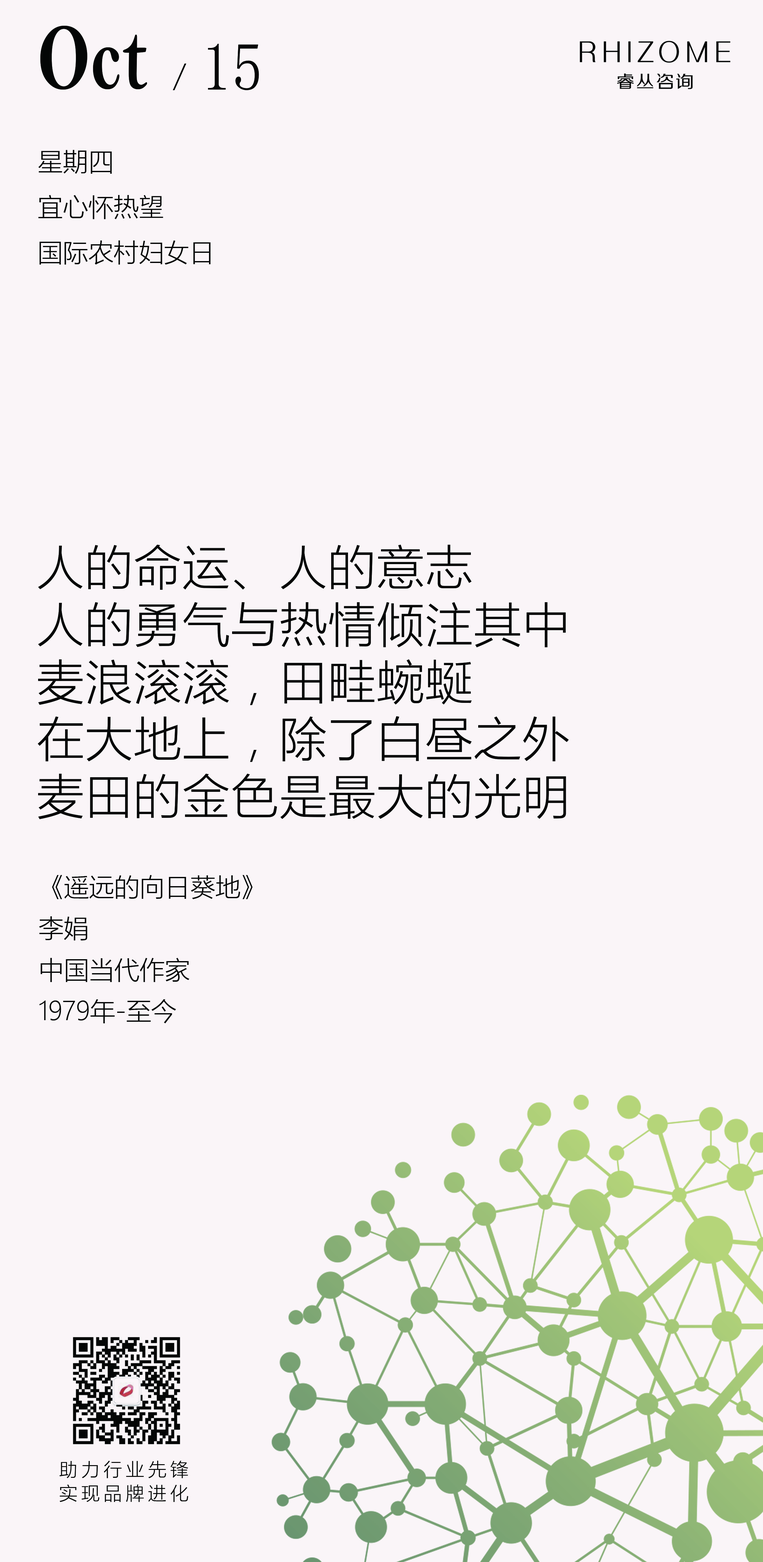
<style>
.page{position:relative;width:763px;height:1562px;background:#faf5f8}
.page>*{position:absolute;margin:0}
.t1{font:96px "BellMTBold";color:#040606;scale:0.71 1}
.t2{font:67.2px "FangSong";color:#040606;scale:0.92 1}
.t3{font:30.1px "MicrosoftYaHeiLight";color:#040606;scale:1.07 1}
.t4{font:25.3px/45.5px "MicrosoftYaHeiLight";color:#040606}
.t5{font:47.6px "MicrosoftYaHeiLight";letter-spacing:0.02em;color:#040606}
.t6{font:25.3px "MicrosoftYaHeiLight";color:#040606}
.t7{font:18.5px/23.8px "MicrosoftYaHeiLight";letter-spacing:0.2em;color:#040606}
</style>
<div class="page">
<p class="t1" style="left:40px;top:26px;width:107px;height:64px">Oct</p>
<p class="t2" style="left:208px;top:44px;width:51px;height:46px">15</p>
<p class="t3" style="left:173px;top:64px;width:13px;height:26px">/</p>
<p class="t4" style="left:38px;top:150px;width:173px;height:115px">星期四<br>宜心怀热望<br>国际农村妇女日</p>
<p class="t5" style="left:38px;top:545px;width:531px;height:478px">人的命运、人的意志<br>人的勇气与热情倾注其中<br>麦浪滚滚，田畦蜿蜒<br>在大地上，除了白昼之外<br>麦田的金色是最大的光明<br><span class="t6">  <br>  《遥远的向日葵地》<br>  李娟<br>  中国当代作家<br>  1979年-至今</span></p>
<p class="t7" style="left:59px;top:1461px;width:129px;height:41px">助力行业先锋<br>实现品牌进化</p>
</div>
